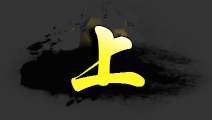
<style>
.page{position:relative;width:212px;height:120px;background:#333333}
.page>*{position:absolute;margin:0}
.t1{font:99px "STXingkai"}
</style>
<div class="page">
<p class="t1" style="left:71px;top:26px;width:74px;height:66px">上</p>
</div>
